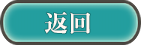
<style>
.page{position:relative;width:141px;height:45px}
.page>*{position:absolute;margin:0}
.t1{font:24px "RyuminPr6N-ExBold";color:#fff7f1}
</style>
<div class="page">
<p class="t1" style="left:44px;top:12px;width:46px;height:22px">返回</p>
</div>
